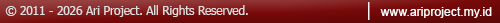
<style>
.page{position:relative;width:500px;height:23px}
.page>*{position:absolute;margin:0}
.t1{font:11.6px "Tahoma";color:#dfdfdf}
.t2{font:18.6px "Exotic350BT-DemiBold";color:#ffffff}
.t3{font:12.1px "ArialMT";color:#ffffff}
</style>
<div class="page">
<p class="t1" style="left:5px;top:5px;width:243px;height:12px">© 2011 - 2026 Ari Project. All Rights Reserved.</p>
<p class="t2" style="left:368px;top:2px;width:2px;height:18px">|</p>
<p class="t3" style="left:380px;top:7px;width:112px;height:11px">www.ariproject.my.id</p>
</div>
